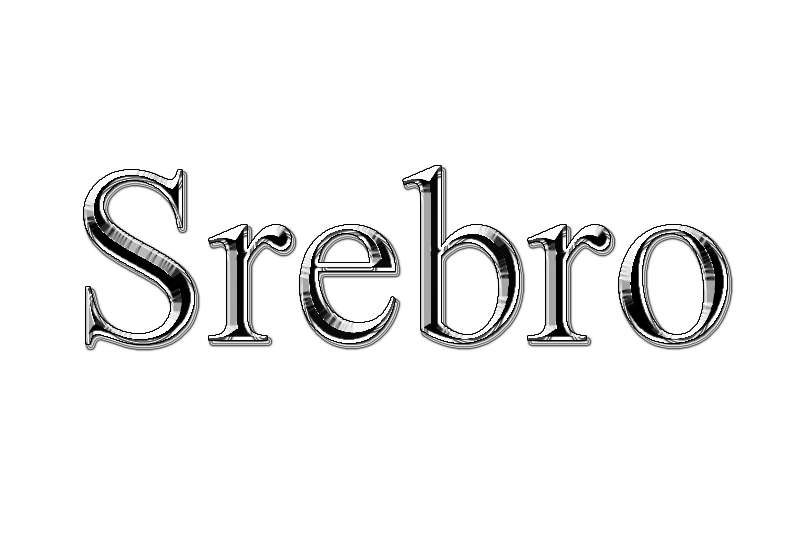
<style>
.page{position:relative;width:800px;height:533px;background:#ffffff}
.page>*{position:absolute;margin:0}
.t1{font:250px "TimesNewRomanPSMT"}
</style>
<div class="page">
<p class="t1" style="left:84px;top:166px;width:643px;height:178px">Srebro</p>
</div>
